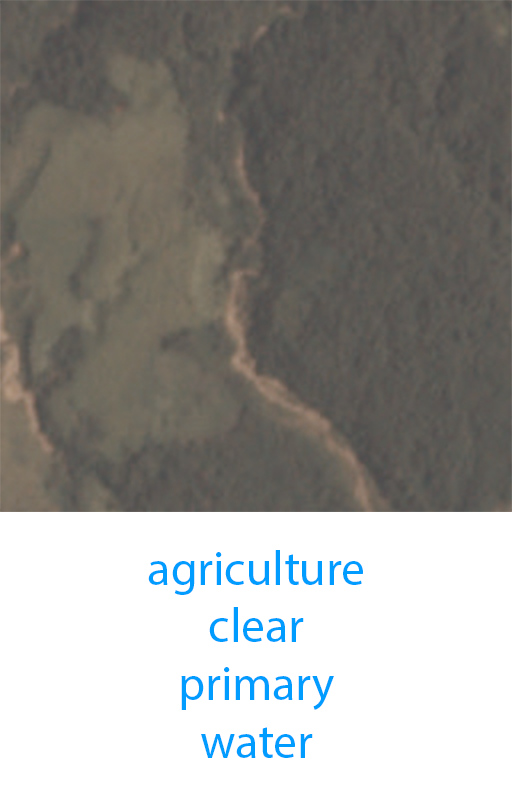
<style>
.page{position:relative;width:512px;height:800px;background:#ffffff}
.page>*{position:absolute;margin:0}
.t1{font:48px "MyriadPro-Regular";color:#009cff}
</style>
<div class="page">
<p class="t1" style="left:148px;top:550px;width:215px;height:208px;text-align:center">agriculture<br>clear<br>primary<br>water</p>
</div>
